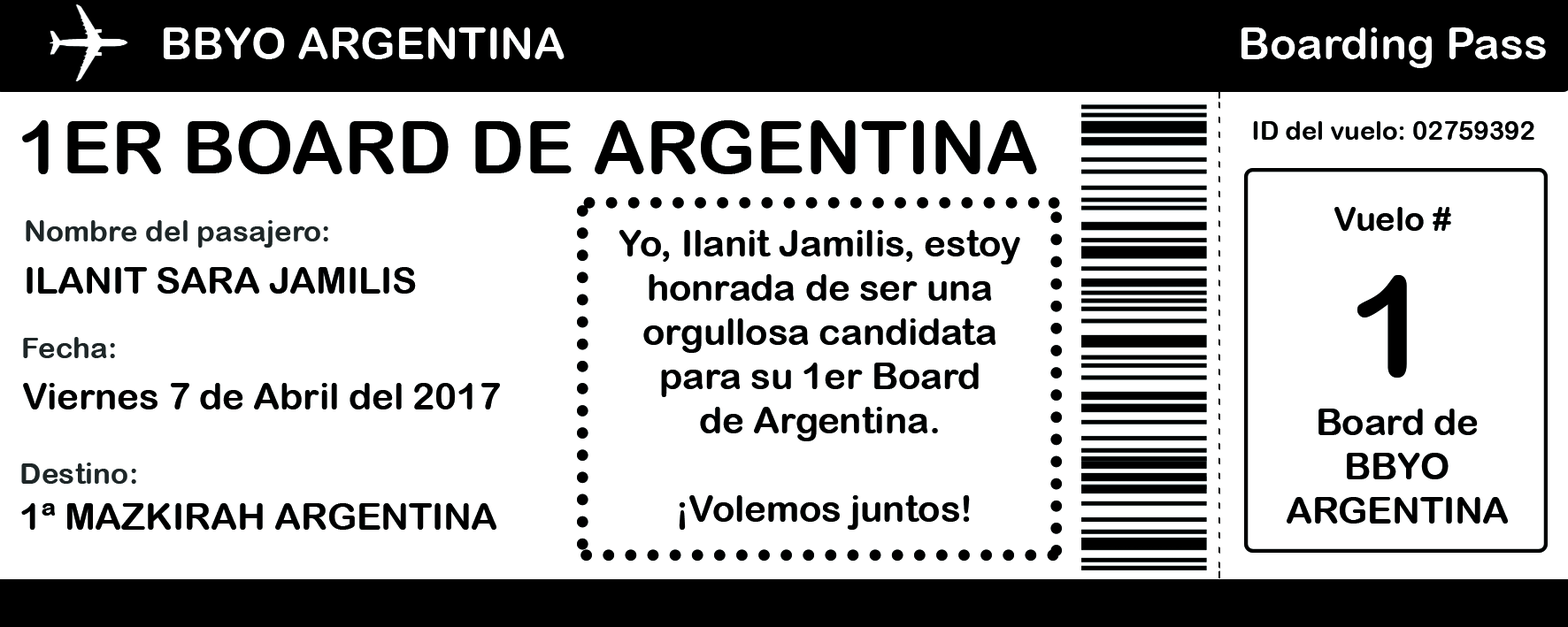
<style>
.page{position:relative;width:1568px;height:627px;background:#ffffff}
.page>*{position:absolute;margin:0}
.t1{font:44.2px "ArialRoundedMTBold";color:#ffffff}
.t2{font:10.6px "ArialRoundedMTBold";color:#ffffff}
.t3{font:73.7px "ArialRoundedMTBold";color:#000000}
.t4{font:25.8px "ArialRoundedMTBold";color:#000000}
.t5{font:33.2px "ArialRoundedMTBold";color:#000000}
.t6{font:29.5px "ArialRoundedMTBold";color:#1e2627}
.t7{font:36.9px "ArialRoundedMTBold";color:#000000}
.t8{font:140.1px "ArialRoundedMTBold";color:#000000}
</style>
<div class="page">
<p class="t1" style="left:163px;top:27px;width:402px;height:32px">BBYO ARGENTINA</p>
<p class="t2" style="left:1241px;top:27px;width:305px;height:41px;text-align:center">Boarding Pass</p>
<p class="t3" style="left:22px;top:120px;width:1015px;height:54px">1ER BOARD DE ARGENTINA</p>
<p class="t4" style="left:1253px;top:121px;width:281px;height:19px">ID del vuelo: 02759392</p>
<p class="t5" style="left:1334px;top:207px;width:117px;height:24px">Vuelo #</p>
<p class="t6" style="left:26px;top:220px;width:302px;height:28px">Nombre del pasajero:</p>
<p class="t7" style="left:619px;top:230px;width:401px;height:300px;text-align:center">Yo, Ilanit Jamilis, estoy <br>honrada de ser una <br>orgullosa candidata <br>para su 1er Board <br>de Argentina. <br><br>¡Volemos juntos!</p>
<p class="t7" style="left:27px;top:267px;width:389px;height:27px">ILANIT SARA JAMILIS</p>
<p class="t8" style="left:1357px;top:275px;width:50px;height:103px">1</p>
<p class="t6" style="left:23px;top:337px;width:92px;height:21px">Fecha:</p>
<p class="t7" style="left:23px;top:383px;width:477px;height:27px">Viernes 7 de Abril del 2017</p>
<p class="t7" style="left:1287px;top:409px;width:221px;height:115px;text-align:center">Board de<br>BBYO<br>ARGENTINA</p>
<p class="t6" style="left:21px;top:463px;width:115px;height:21px">Destino:</p>
<p class="t7" style="left:21px;top:503px;width:475px;height:27px">1ª MAZKIRAH ARGENTINA</p>
</div>
